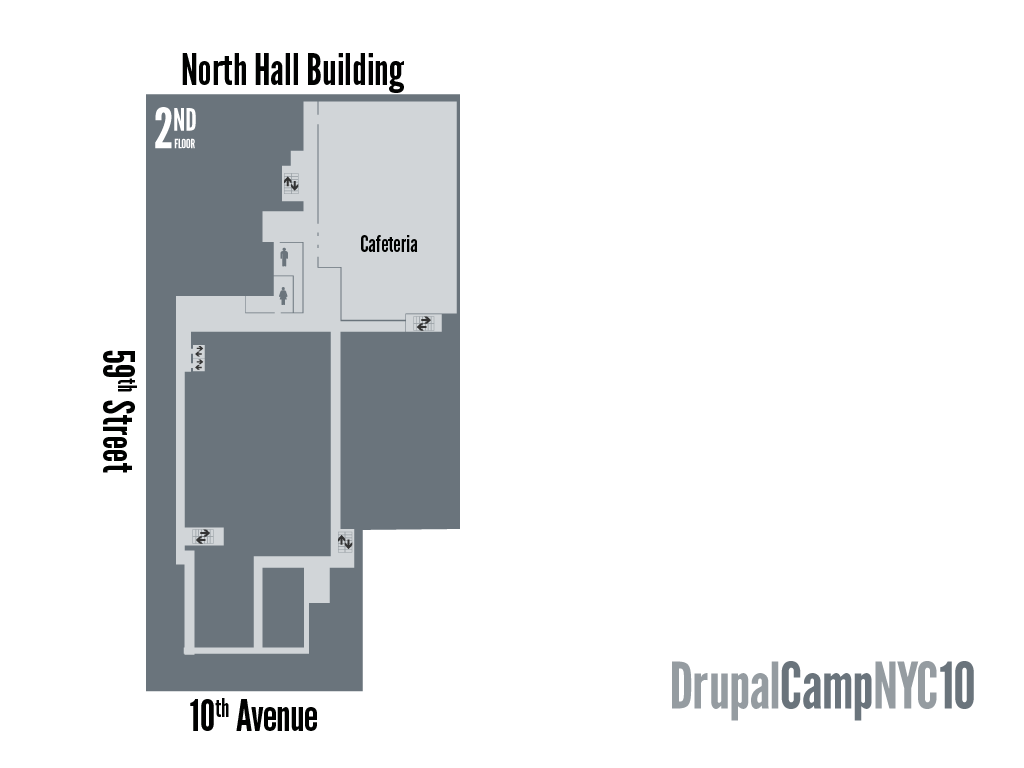
<style>
.page{position:relative;width:1024px;height:768px;background:#ffffff}
.page>*{position:absolute;margin:0}
.t1{font:43px "LeagueGothic";color:#000100}
.t2{font:22.5px "LeagueGothic";color:#000100}
</style>
<div class="page">
<p class="t1" style="left:182px;top:53px;width:222px;height:40px">North Hall Building</p>
<p class="t2" style="left:361px;top:235px;width:57px;height:17px">Cafeteria</p>
<p class="t1" style="left:103px;top:350px;width:34px;height:123px">59th Street</p>
<p class="t1" style="left:190px;top:698px;width:127px;height:33px">10th Avenue</p>
</div>
